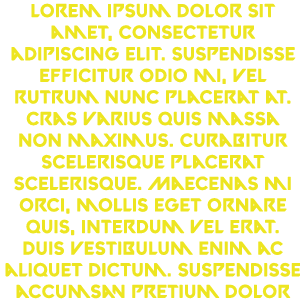
<style>
.page{position:relative;width:300px;height:300px;background:#ffffff}
.page>*{position:absolute;margin:0}
.t1{font:18px "VALORANT-Regular";color:#ede521;font-weight:bold}
</style>
<div class="page">
<p class="t1" style="left:5px;top:3px;width:297px;height:296px;text-align:center">Lorem ipsum dolor sit amet, consectetur adipiscing elit. Suspendisse efficitur odio mi, vel rutrum nunc placerat at. Cras varius quis massa non maximus. Curabitur scelerisque placerat scelerisque. Maecenas mi orci, mollis eget ornare quis, interdum vel erat. Duis vestibulum enim ac aliquet dictum. Suspendisse accumsan pretium dolor vitae sodales. Nullam consequat est nec iaculis varius. Nullam ut semper mi, vitae eleifend sem. Praesent id erat ex.</p>
</div>
